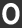
<style>
.page{position:relative;width:22px;height:28px;background:#333333}
.page>*{position:absolute;margin:0}
.t1{font:30px "ProductSans-Bold";color:#ffffff}
</style>
<div class="page">
<p class="t1" style="left:2px;top:3px;width:18px;height:22px">0</p>
</div>
